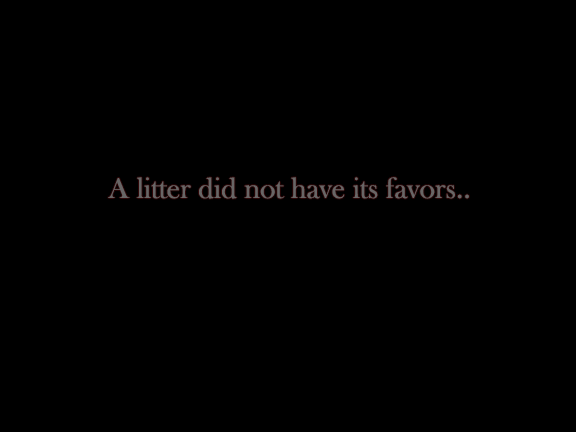
<style>
.page{position:relative;width:576px;height:432px;background:#000000}
.page>*{position:absolute;margin:0}
.t1{font:30px "BaskOldFace";color:#686666}
</style>
<div class="page">
<p class="t1" style="left:108px;top:177px;width:361px;height:22px">A litter did not have its favors..</p>
</div>
